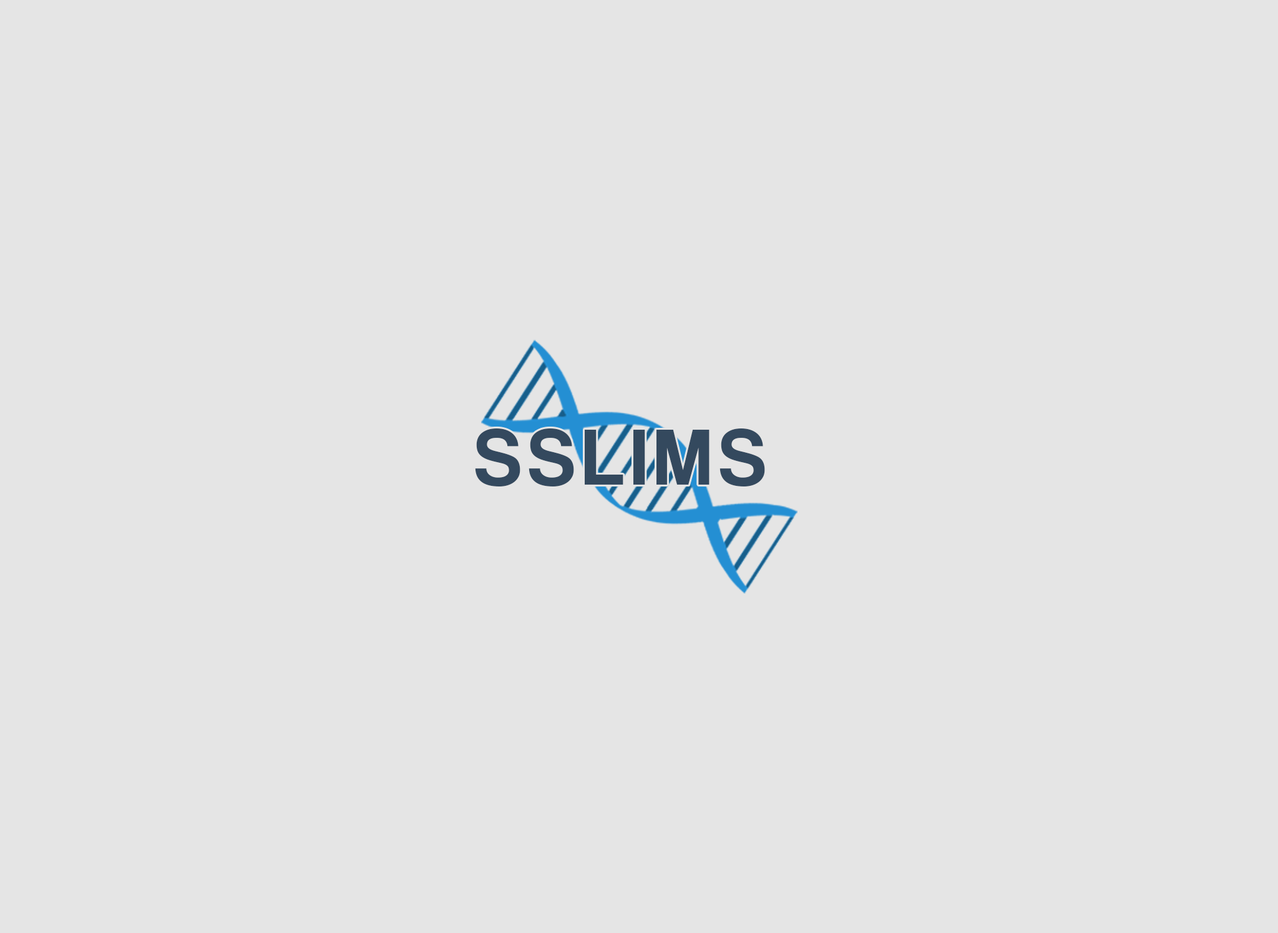
<style>
.page{position:relative;width:1278px;height:933px;background:#e5e5e5}
.page>*{position:absolute;margin:0}
.t1{font:81.8px "CoolveticaRg-Regular";letter-spacing:0.1em;color:#34495e}
</style>
<div class="page">
<p class="t1" style="left:475px;top:429px;width:290px;height:58px">SSLIMS</p>
</div>
